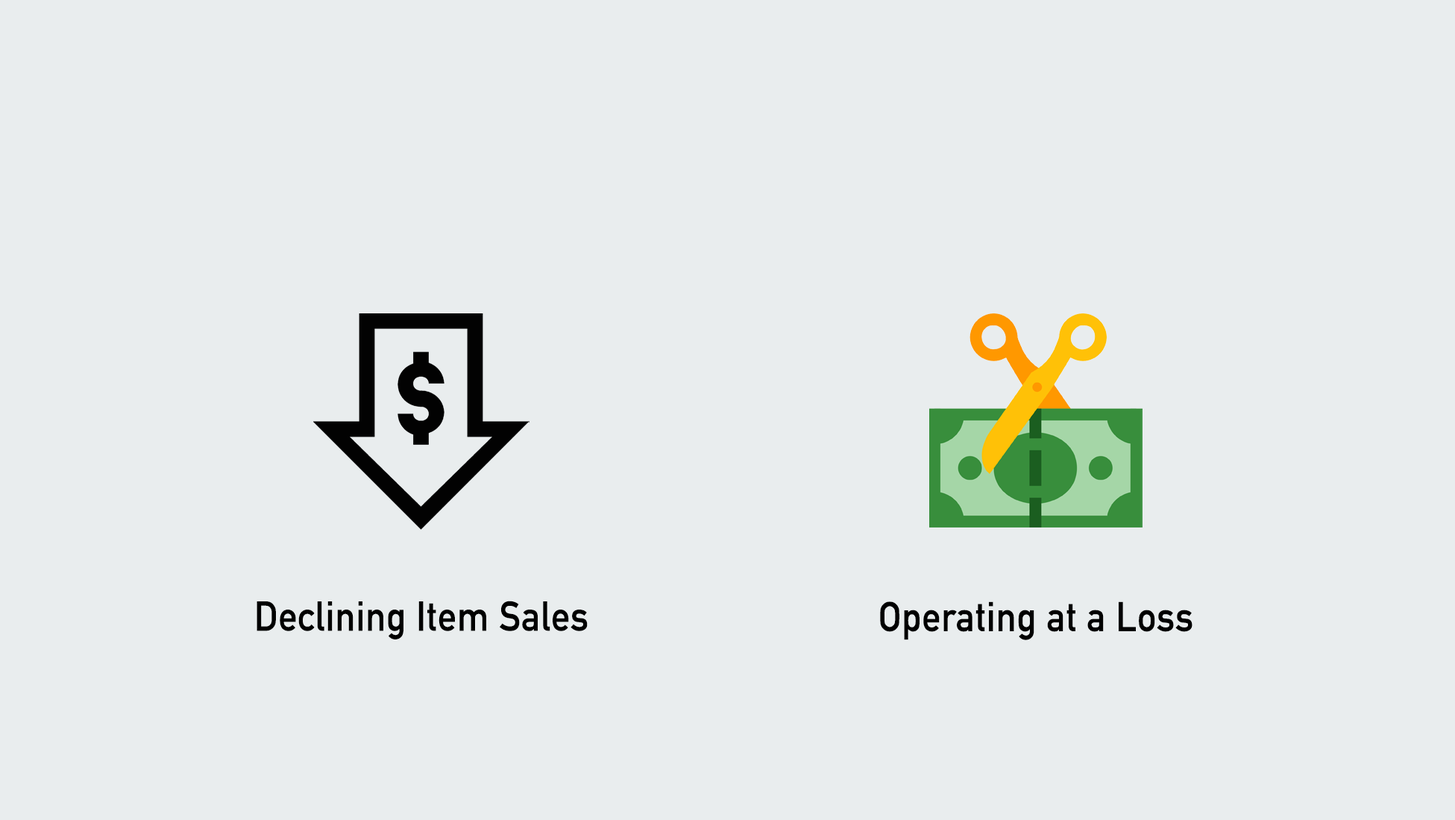
<style>
.page{position:relative;width:1455px;height:820px;background:#e9edee}
.page>*{position:absolute;margin:0}
.t1{font:41px "DINAlternate-Bold";letter-spacing:0.02em;color:#000000;scale:0.91 1}
</style>
<div class="page">
<p class="t1" style="left:257px;top:600px;width:331px;height:39px">Declining Item Sales</p>
<p class="t1" style="left:880px;top:601px;width:312px;height:39px">Operating at a Loss</p>
</div>
